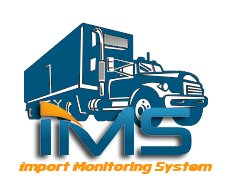
<style>
.page{position:relative;width:231px;height:190px;background:#ffffff}
.page>*{position:absolute;margin:0}
.t1{font:12.5px "InfiniteJustice";color:#fb980e}
</style>
<div class="page">
<p class="t1" style="left:19px;top:162px;width:194px;height:12px">Import Monitoring System</p>
</div>
